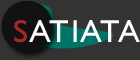
<style>
.page{position:relative;width:140px;height:60px;background:#333333}
.page>*{position:absolute;margin:0}
.t1{font:32px "GillSansMT";letter-spacing:0.05em;color:#ffffff}
.t2{font:32px "GillSansMT";letter-spacing:0.05em;color:#aa2525}
</style>
<div class="page">
<p class="t1" style="left:14px;top:20px;width:126px;height:23px"><span class="t2">S</span>ATIATA</p>
</div>
